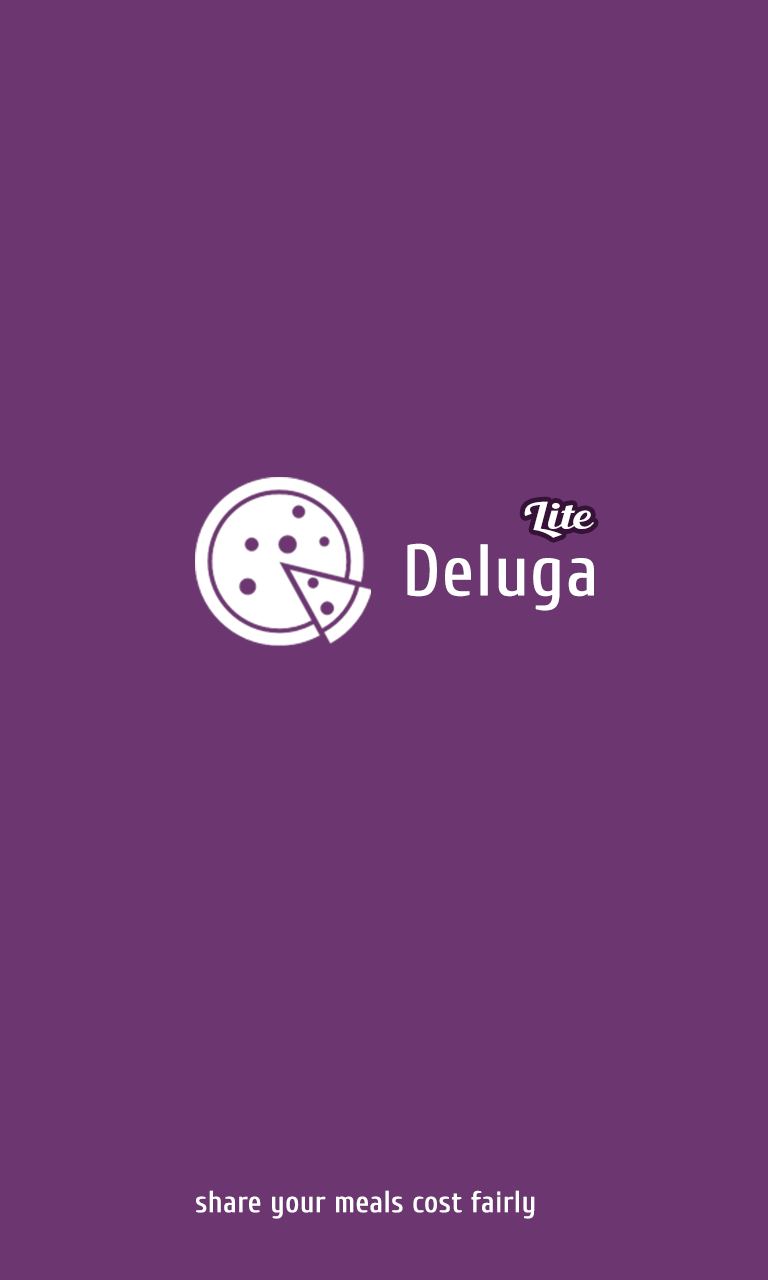
<style>
.page{position:relative;width:768px;height:1280px;background:#6c3670}
.page>*{position:absolute;margin:0}
.t1{font:36px "BlendaScript";color:#ffffff;scale:1.33 1}
.t2{font:72px "Cuprum-Regular";color:#ffffff;font-weight:bold}
.t3{font:30px "Cuprum-Regular";color:#ffffff;font-weight:bold}
</style>
<div class="page">
<p class="t1" style="left:524px;top:501px;width:70px;height:37px">Lite</p>
<p class="t2" style="left:407px;top:543px;width:187px;height:68px">Deluga</p>
<p class="t3" style="left:196px;top:1190px;width:339px;height:29px">share your meals cost fairly</p>
</div>
